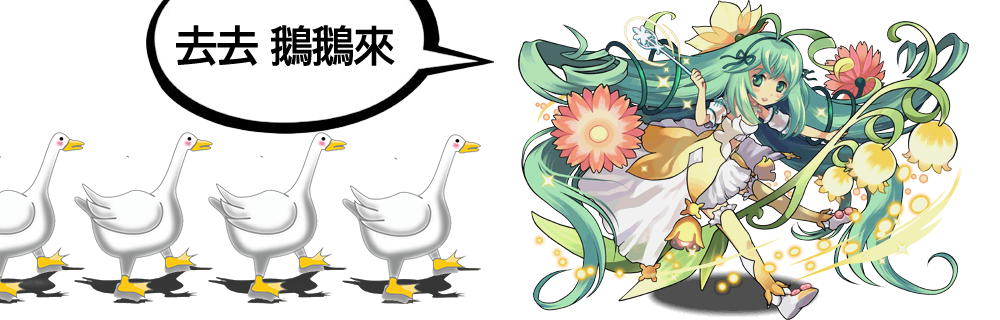
<style>
.page{position:relative;width:1000px;height:320px;background:#ffffff}
.page>*{position:absolute;margin:0}
.t1{font:44.1px "Apple-LiHeiPro";letter-spacing:-0.08em;color:#000000;font-weight:bold}
</style>
<div class="page">
<p class="t1" style="left:176px;top:25px;width:219px;height:41px">去去 鵝鵝來</p>
</div>
